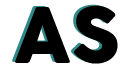
<style>
.page{position:relative;width:128px;height:64px;background:#ffffff}
.page>*{position:absolute;margin:0}
.t1{font:75px "COCOGOOSE";color:#000000}
</style>
<div class="page">
<p class="t1" style="left:12px;top:4px;width:103px;height:59px">AS</p>
<p class="t1" style="left:15px;top:5px;width:103px;height:59px">AS</p>
</div>
